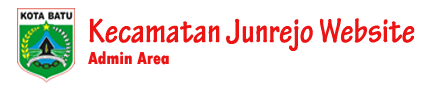
<style>
.page{position:relative;width:425px;height:85px;background:#ffffff}
.page>*{position:absolute;margin:0}
.t1{font:36px "TektonPro-BoldCond";color:#ec1313}
.t2{font:18.3px "TwCenMT-CondensedExtraBold";color:#ec1313}
</style>
<div class="page">
<p class="t1" style="left:88px;top:18px;width:327px;height:47px">Kecamatan Junrejo Website<br><span class="t2">Admin Area</span></p>
</div>
